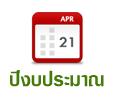
<style>
.page{position:relative;width:114px;height:100px;background:#ffffff}
.page>*{position:absolute;margin:0}
.t1{font:27px "DSELardPhrao";color:#437b06}
</style>
<div class="page">
<p class="t1" style="left:10px;top:70px;width:94px;height:17px">ปีงบประมาณ</p>
</div>
